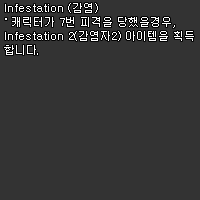
<style>
.page{position:relative;width:200px;height:200px;background:#333333}
.page>*{position:absolute;margin:0}
.t1{font:11px/14px "Dotum";color:#ffffff}
</style>
<div class="page">
<p class="t1" style="left:4px;top:3px;width:190px;height:52px">Infestation (감염)<br>˚ 캐릭터가 7번 피격을 당했을경우,<br>Infestation 2(감염자2) 아이템을 획득<br>합니다.</p>
</div>
